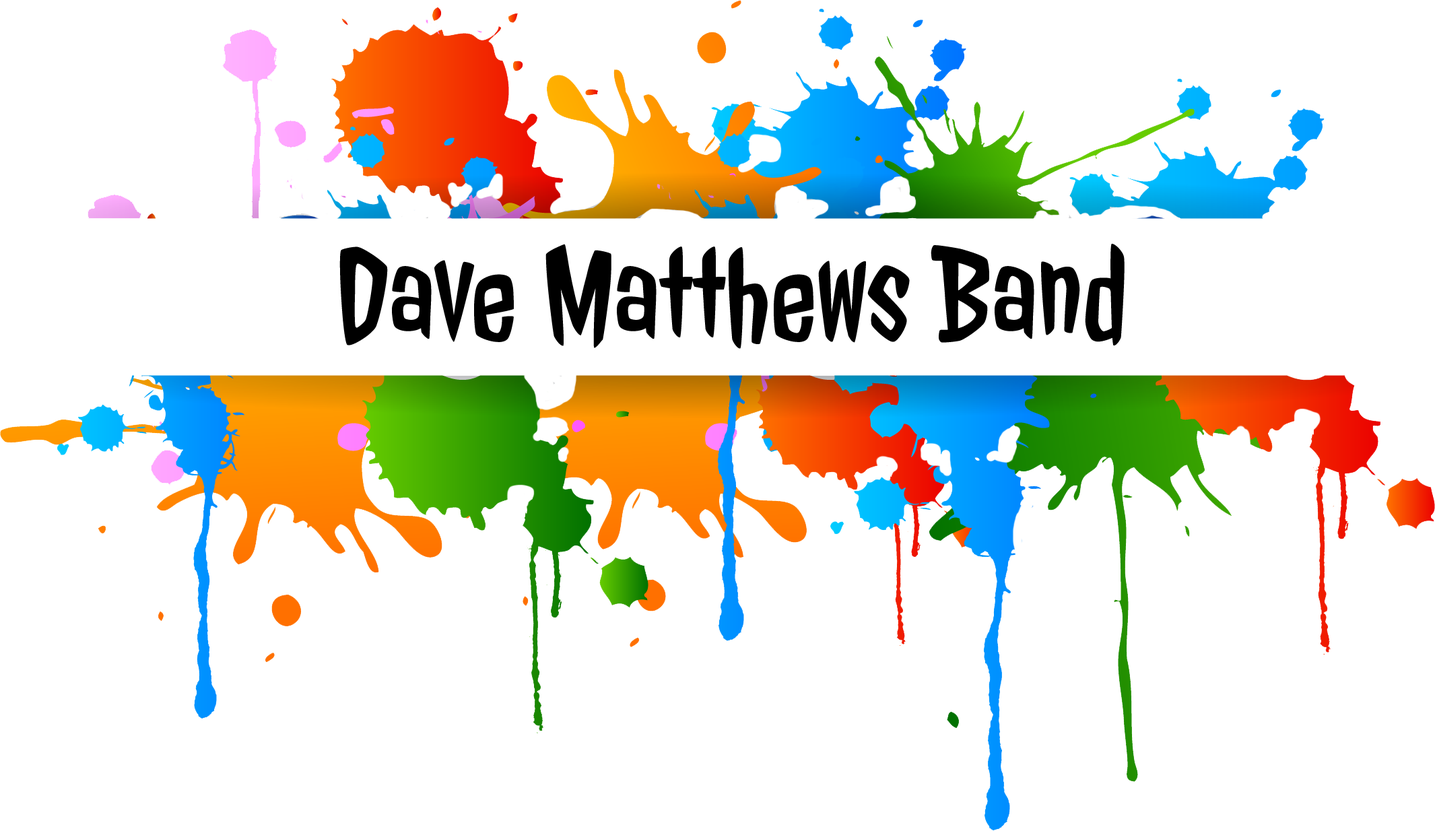
<style>
.page{position:relative;width:1435px;height:831px;background:#ffffff}
.page>*{position:absolute;margin:0}
.t1{font:134.7px "JollyLodger";color:#000000}
</style>
<div class="page">
<p class="t1" style="left:339px;top:244px;width:786px;height:105px">Dave Matthews Band</p>
</div>
